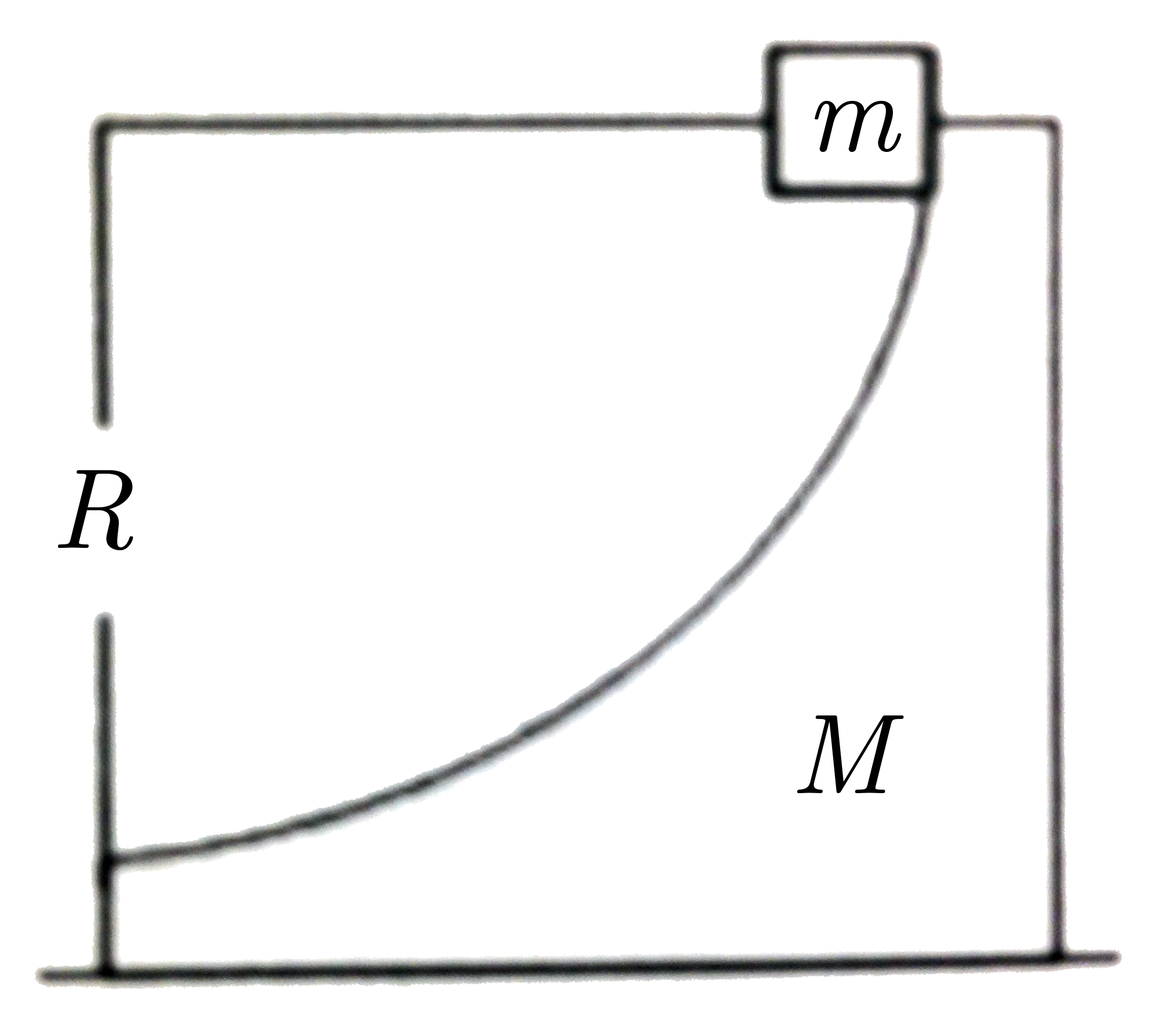
<style>
.page{position:relative;width:1155px;height:1032px;background:#ffffff}
.page>*{position:absolute;margin:0}
.t1{font:113.7px "CMUSerif-Italic";color:#000000}
</style>
<div class="page">
<p class="t1" style="left:815px;top:101px;width:87px;height:51px">m</p>
<p class="t1" style="left:58px;top:470px;width:75px;height:80px">R</p>
<p class="t1" style="left:797px;top:716px;width:107px;height:77px">M</p>
</div>
